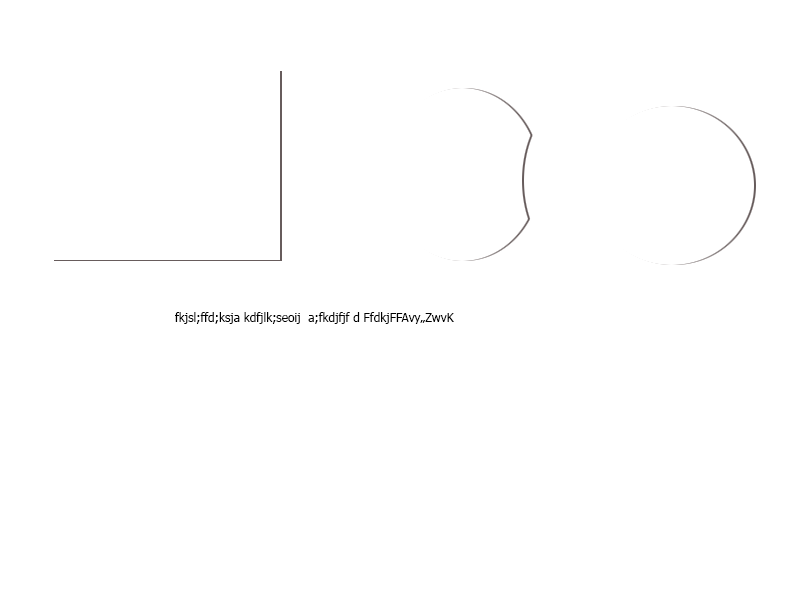
<style>
.page{position:relative;width:800px;height:600px;background:#ffffff}
.page>*{position:absolute;margin:0}
.t1{font:12px "Tahoma";color:#000000}
</style>
<div class="page">
<p class="t1" style="left:175px;top:312px;width:279px;height:12px">fkjsl;ffd;ksja kdfjlk;seoij  a;fkdjfjf d FfdkjFFAvy„ZwvK</p>
</div>
